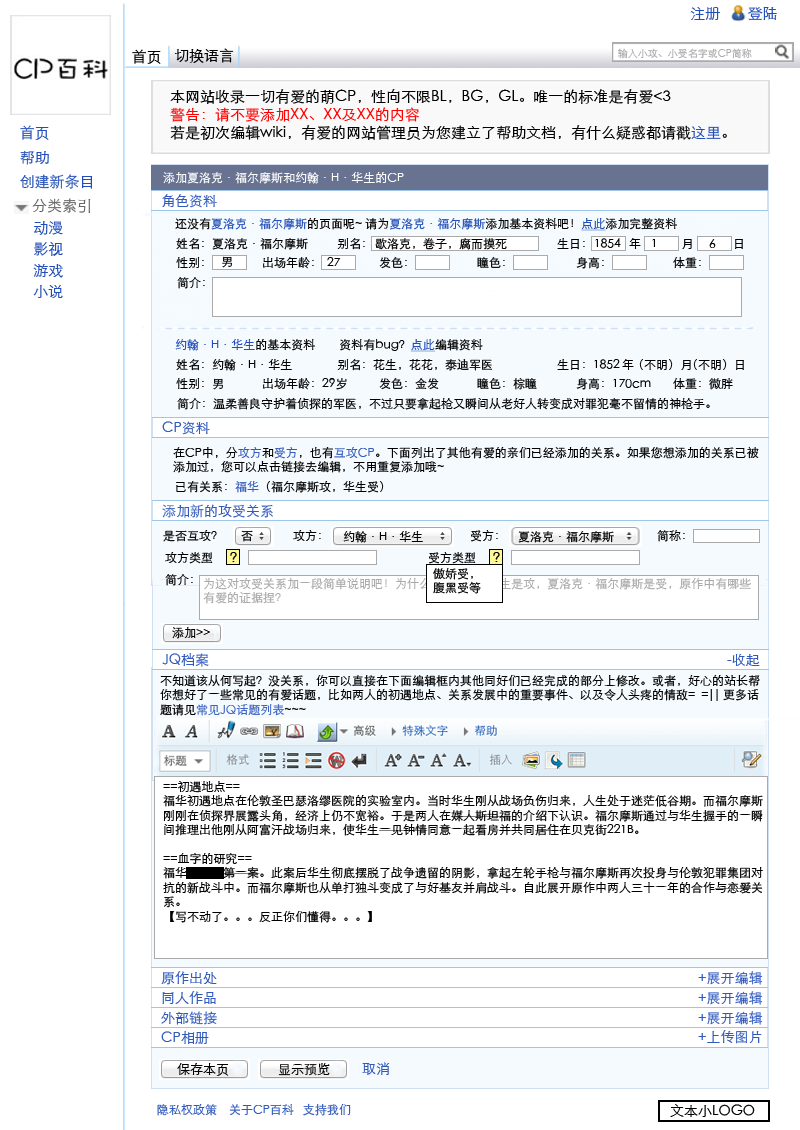
<style>
.page{position:relative;width:800px;height:1130px;background:#ffffff}
.page>*{position:absolute;margin:0}
.t1{font:15px "STHeitiSC-Light";color:#224eb7}
.t2{font:15px "STHeitiSC-Light";color:#000000}
.t3{font:10px "STHeitiSC-Light";color:#aaaaaa}
.t4{font:15px "STHeitiSC-Light";color:#ff0000}
.t5{font:12px "STHeitiSC-Light";color:#ffffff}
.t6{font:15px "STHeitiSC-Light";color:#656565}
.t7{font:14px "STHeitiSC-Light";color:#315abc}
.t8{font:12px "STHeitiSC-Light";color:#224eb7}
.t9{font:12px "STHeitiSC-Light";color:#000000}
.t10{font:12px "STHeitiSC-Light";color:#224eb7;text-decoration:underline}
.t11{font:12px "STHeitiSC-Light"}
.t12{font:12px "STHeitiSC-Light";color:#315abc}
.t13{font:12px "STHeitiSC-Light";color:#aaaaaa}
.t14{font:12px "STHeitiSC-Light";color:#3f65c0}
.t15{font:14px "STHeitiSC-Light";color:#3059bc}
.t16{font:13px "STHeitiSC-Light";color:#000000}
.t17{font:14px "STHeitiSC-Light";color:#000000}
</style>
<div class="page">
<p class="t1" style="left:690px;top:7px;width:30px;height:13px">注册</p>
<p class="t1" style="left:748px;top:7px;width:29px;height:14px">登陆</p>
<p class="t2" style="left:132px;top:49px;width:29px;height:15px">首页</p>
<p class="t2" style="left:174px;top:48px;width:60px;height:15px">切换语言</p>
<p class="t3" style="left:617px;top:48px;width:135px;height:11px">输入小攻、小受名字或CP简称</p>
<p class="t2" style="left:170px;top:89px;width:557px;height:51px">本网站收录一切有爱的萌CP，性向不限BL，BG，GL。唯一的标准是有爱&lt;3<br><span class="t4">警告：请不要添加XX、XX及XX的内容<br></span>若是初次编辑wiki，有爱的网站管理员为您建立了帮助文档，有什么疑惑都请戳<span class="t1">这里</span>。</p>
<p class="t1" style="left:20px;top:125px;width:29px;height:15px">首页</p>
<p class="t1" style="left:20px;top:150px;width:29px;height:15px">帮助</p>
<p class="t1" style="left:20px;top:174px;width:73px;height:15px">创建新条目</p>
<p class="t5" style="left:163px;top:172px;width:241px;height:12px">添加夏洛克·福尔摩斯和约翰·H·华生的CP</p>
<p class="t6" style="left:32px;top:198px;width:59px;height:15px">分类索引</p>
<p class="t7" style="left:162px;top:194px;width:55px;height:14px">角色资料</p>
<p class="t1" style="left:34px;top:221px;width:29px;height:14px">动漫</p>
<p class="t8" style="left:175px;top:218px;width:502px;height:13px"><span class="t9">还没有</span>夏洛克·福尔摩斯<span class="t9">的页面呢~ 请为</span>夏洛克·福尔摩斯<span class="t9">添加基本资料吧！</span><span class="t10">点此</span><span class="t9">添加完整资料</span></p>
<p class="t1" style="left:34px;top:242px;width:29px;height:14px">影视</p>
<p class="t9" style="left:176px;top:238px;width:132px;height:12px">姓名：夏洛克·福尔摩斯</p>
<p class="t9" style="left:337px;top:238px;width:28px;height:12px">别名：</p>
<p class="t9" style="left:375px;top:238px;width:132px;height:12px">歇洛克，卷子，腐而摸死</p>
<p class="t9" style="left:557px;top:238px;width:28px;height:11px">生日：</p>
<p class="t9" style="left:595px;top:238px;width:26px;height:10px">1854</p>
<p class="t9" style="left:629px;top:238px;width:12px;height:11px">年</p>
<p class="t9" style="left:652px;top:239px;width:3px;height:8px">1</p>
<p class="t9" style="left:682px;top:239px;width:10px;height:10px">月</p>
<p class="t9" style="left:709px;top:239px;width:7px;height:9px">6</p>
<p class="t9" style="left:735px;top:239px;width:8px;height:10px">日</p>
<p class="t9" style="left:176px;top:257px;width:28px;height:11px">性别：</p>
<p class="t11" style="left:222px;top:256px;width:10px;height:12px">男</p>
<p class="t9" style="left:263px;top:257px;width:51px;height:12px">出场年龄：</p>
<p class="t9" style="left:327px;top:257px;width:14px;height:9px">27</p>
<p class="t9" style="left:379px;top:257px;width:28px;height:12px">发色：</p>
<p class="t9" style="left:477px;top:257px;width:28px;height:11px">瞳色：</p>
<p class="t11" style="left:576px;top:257px;width:28px;height:12px">身高：</p>
<p class="t9" style="left:673px;top:257px;width:28px;height:11px">体重：</p>
<p class="t1" style="left:33px;top:264px;width:30px;height:14px">游戏</p>
<p class="t9" style="left:177px;top:277px;width:28px;height:12px">简介：</p>
<p class="t1" style="left:33px;top:285px;width:30px;height:13px">小说</p>
<p class="t9" style="left:175px;top:339px;width:308px;height:13px"><span class="t8">约翰·H·华生</span>的基本资料        资料有bug？<span class="t10">点此</span>编辑资料</p>
<p class="t9" style="left:176px;top:359px;width:116px;height:12px">姓名：约翰·H·华生</p>
<p class="t9" style="left:337px;top:359px;width:155px;height:12px">别名：花生，花花，泰迪军医</p>
<p class="t9" style="left:557px;top:359px;width:63px;height:11px">生日：1852</p>
<p class="t9" style="left:622px;top:359px;width:12px;height:11px">年</p>
<p class="t9" style="left:639px;top:359px;width:52px;height:11px">（不明）月</p>
<p class="t9" style="left:693px;top:359px;width:51px;height:11px">（不明）日</p>
<p class="t9" style="left:176px;top:378px;width:47px;height:12px">性别：男</p>
<p class="t9" style="left:263px;top:378px;width:84px;height:12px">出场年龄：29岁</p>
<p class="t11" style="left:379px;top:378px;width:60px;height:12px">发色：金发</p>
<p class="t11" style="left:477px;top:378px;width:60px;height:12px">瞳色：棕瞳</p>
<p class="t9" style="left:576px;top:378px;width:75px;height:12px">身高：170cm</p>
<p class="t9" style="left:673px;top:378px;width:60px;height:12px">体重：微胖</p>
<p class="t9" style="left:177px;top:397px;width:533px;height:13px">简介：温柔善良守护着侦探的军医，不过只要拿起枪又瞬间从老好人转变成对罪犯毫不留情的神枪手。</p>
<p class="t7" style="left:162px;top:421px;width:48px;height:14px">CP资料</p>
<p class="t9" style="left:173px;top:446px;width:586px;height:27px">在CP中，分<span class="t12">攻方</span>和<span class="t12">受方</span>，也有<span class="t12">互攻CP</span>。下面列出了其他有爱的亲们已经添加的关系。如果您想添加的关系已被添加过，您可以点击链接去编辑，不用重复添加哦~</p>
<p class="t9" style="left:176px;top:481px;width:208px;height:12px">已有关系：<span class="t12">福华</span>（福尔摩斯攻，华生受）</p>
<p class="t7" style="left:162px;top:504px;width:111px;height:14px">添加新的攻受关系</p>
<p class="t9" style="left:163px;top:530px;width:54px;height:12px">是否互攻？</p>
<p class="t11" style="left:241px;top:530px;width:12px;height:12px">否</p>
<p class="t9" style="left:293px;top:530px;width:28px;height:11px">攻方：</p>
<p class="t9" style="left:343px;top:531px;width:80px;height:12px">约翰·H·华生</p>
<p class="t9" style="left:471px;top:530px;width:27px;height:12px">受方：</p>
<p class="t9" style="left:518px;top:531px;width:96px;height:12px">夏洛克·福尔摩斯</p>
<p class="t9" style="left:657px;top:530px;width:28px;height:12px">简称：</p>
<p class="t9" style="left:165px;top:552px;width:48px;height:12px">攻方类型</p>
<p class="t9" style="left:429px;top:552px;width:47px;height:12px">受方类型</p>
<p class="t11" style="left:433px;top:568px;width:48px;height:26px">傲娇受，<br>腹黑受等</p>
<p class="t9" style="left:165px;top:574px;width:28px;height:12px">简介：</p>
<p class="t13" style="left:203px;top:578px;width:548px;height:26px">为这对攻受关系加一段简单说明吧！为什么约翰·H·华生是攻，夏洛克·福尔摩斯是受，原作中有哪些<br>有爱的证据捏？</p>
<p class="t9" style="left:172px;top:627px;width:38px;height:12px">添加&gt;&gt;</p>
<p class="t7" style="left:162px;top:653px;width:47px;height:14px">JQ档案</p>
<p class="t7" style="left:727px;top:654px;width:33px;height:12px">-收起</p>
<p class="t9" style="left:160px;top:675px;width:600px;height:41px">不知道该从何写起？没关系，你可以直接在下面编辑框内其他同好们已经完成的部分上修改。或者，好心的站长帮<br>你想好了一些常见的有爱话题，比如两人的初遇地点、关系发展中的重要事件、以及令人头疼的情敌=  =|| 更多话<br>题请见<span class="t14">常见JQ话题列表</span>~~~</p>
<p class="t9" style="left:163px;top:781px;width:600px;height:142px">==初遇地点==<br>福华初遇地点在伦敦圣巴瑟洛缪医院的实验室内。当时华生刚从战场负伤归来，人生处于迷茫低谷期。而福尔摩斯<br>刚刚在侦探界展露头角，经济上仍不宽裕。于是两人在媒人斯坦福的介绍下认识。福尔摩斯通过与华生握手的一瞬<br>间推理出他刚从阿富汗战场归来，使华生一见钟情同意一起看房并共同居住在贝克街221B。<br><br>==血字的研究==<br>福华同居后第一案。此案后华生彻底摆脱了战争遗留的阴影，拿起左轮手枪与福尔摩斯再次投身与伦敦犯罪集团对<br>抗的新战斗中。而福尔摩斯也从单打独斗变成了与好基友并肩战斗。自此展开原作中两人三十一年的合作与恋爱关<br>系。<br>【写不动了。。。反正你们懂得。。。】</p>
<p class="t7" style="left:161px;top:971px;width:56px;height:14px">原作出处</p>
<p class="t7" style="left:698px;top:971px;width:65px;height:14px">+展开编辑</p>
<p class="t7" style="left:162px;top:991px;width:54px;height:13px">同人作品</p>
<p class="t7" style="left:698px;top:991px;width:65px;height:14px">+展开编辑</p>
<p class="t7" style="left:161px;top:1011px;width:56px;height:14px">外部链接</p>
<p class="t7" style="left:698px;top:1011px;width:65px;height:14px">+展开编辑</p>
<p class="t7" style="left:161px;top:1031px;width:48px;height:13px">CP相册</p>
<p class="t7" style="left:698px;top:1030px;width:64px;height:14px">+上传图片</p>
<p class="t15" style="left:362px;top:1062px;width:28px;height:13px">取消</p>
<p class="t16" style="left:177px;top:1063px;width:52px;height:13px">保存本页</p>
<p class="t16" style="left:278px;top:1063px;width:52px;height:13px">显示预览</p>
<p class="t12" style="left:157px;top:1103px;width:194px;height:13px">隐私权政策    关于CP百科   支持我们</p>
<p class="t17" style="left:670px;top:1104px;width:85px;height:13px">文本小LOGO</p>
</div>
